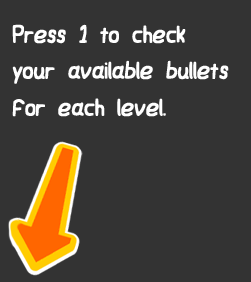
<style>
.page{position:relative;width:251px;height:282px;background:#333333}
.page>*{position:absolute;margin:0}
.t1{font:30.4px "JWerd";color:#ffffff}
</style>
<div class="page">
<p class="t1" style="left:12px;top:24px;width:217px;height:93px">Press 1 to check <br>your available bullets<br>for each level.</p>
</div>
